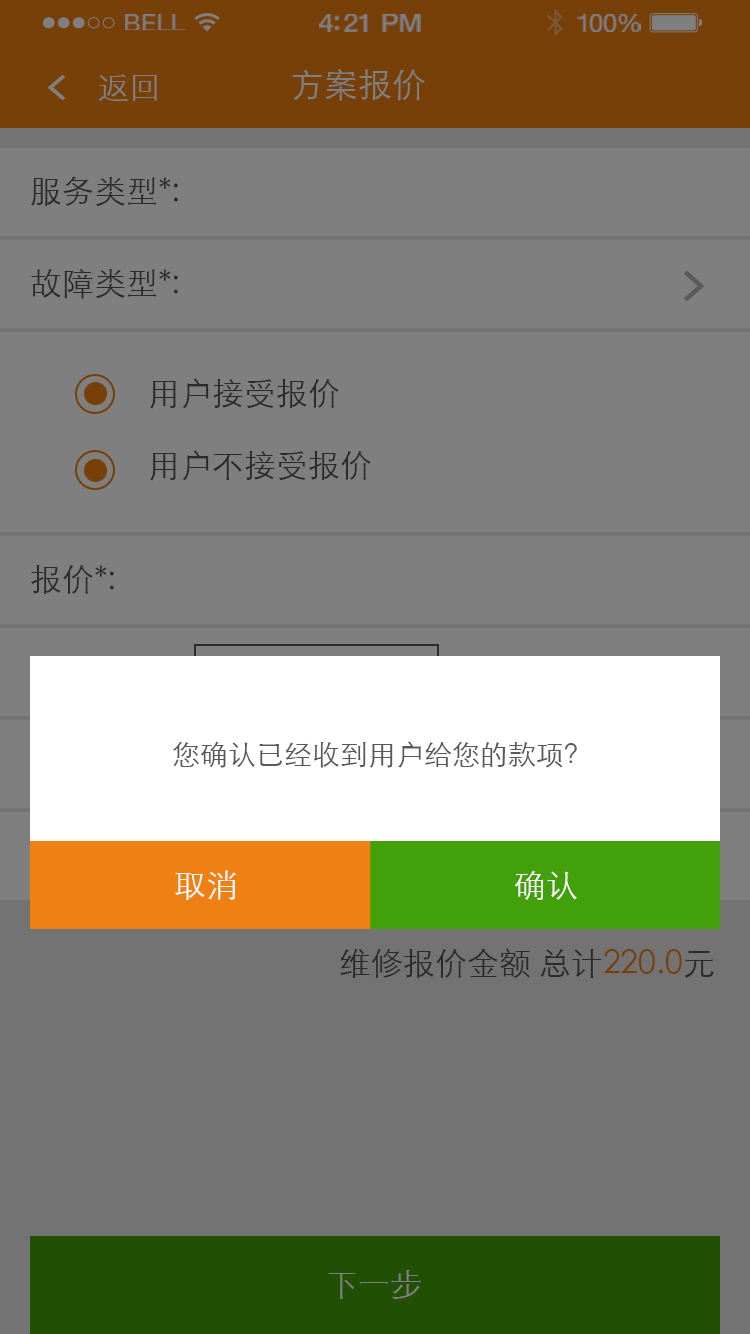
<style>
.page{position:relative;width:750px;height:1334px;background:#7f7f7f}
.page>*{position:absolute;margin:0}
.t1{font:23.3px "HelveticaNeue";letter-spacing:0.02em;color:#7f7f7f;scale:1.06 1}
.t2{font:25.3px "HelveticaNeue-Medium";letter-spacing:-0.02em;color:#7f7f7f;scale:1.06 1}
.t3{font:24.3px "HelveticaNeue";letter-spacing:-0.02em;color:#7f7f7f;scale:1.06 1}
.t4{font:32px "STXihei";color:#7f7f7f}
.t5{font:34px "STXihei";color:#7f7f7f}
.t6{font:32px "STXihei";color:#2c2b2b}
.t7{font:28px "STXihei";color:#595757}
.t8{font:32px "STXihei";color:#ffffff}
</style>
<div class="page">
<p class="t1" style="left:125px;top:14px;width:61px;height:16px">BELL</p>
<p class="t2" style="left:319px;top:14px;width:102px;height:18px">4:21 PM</p>
<p class="t3" style="left:577px;top:14px;width:64px;height:18px">100%</p>
<p class="t4" style="left:98px;top:74px;width:59px;height:27px">返回</p>
<p class="t5" style="left:292px;top:69px;width:133px;height:32px">方案报价</p>
<p class="t6" style="left:31px;top:176px;width:147px;height:31px">服务类型*:</p>
<p class="t6" style="left:31px;top:269px;width:147px;height:30px">故障类型*:</p>
<p class="t6" style="left:150px;top:378px;width:189px;height:31px">用户接受报价</p>
<p class="t6" style="left:150px;top:450px;width:221px;height:31px">用户不接受报价</p>
<p class="t6" style="left:31px;top:565px;width:83px;height:29px">报价*:</p>
<p class="t7" style="left:173px;top:741px;width:404px;height:27px">您确认已经收到用户给您的款项？</p>
<p class="t8" style="left:175px;top:870px;width:61px;height:30px">取消</p>
<p class="t8" style="left:514px;top:870px;width:63px;height:30px">确认</p>
<p class="t6" style="left:340px;top:948px;width:374px;height:30px">维修报价金额 总计220.0元</p>
<p class="t4" style="left:328px;top:1270px;width:93px;height:29px">下一步</p>
</div>
